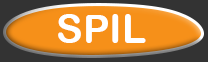
<style>
.page{position:relative;width:208px;height:62px;background:#f69019}
.page>*{position:absolute;margin:0}
.t1{font:40px "ArialRoundedMTBold";color:#ffffff}
</style>
<div class="page">
<p class="t1" style="left:58px;top:14px;width:88px;height:29px">SPIL</p>
</div>
